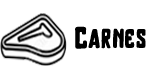
<style>
.page{position:relative;width:150px;height:80px;background:#ffffff}
.page>*{position:absolute;margin:0}
.t1{font:27.2px "BROTHER-Bold";letter-spacing:0.05em;color:#000000;scale:0.93 1}
</style>
<div class="page">
<p class="t1" style="left:75px;top:26px;width:71px;height:23px">Carnes</p>
</div>
